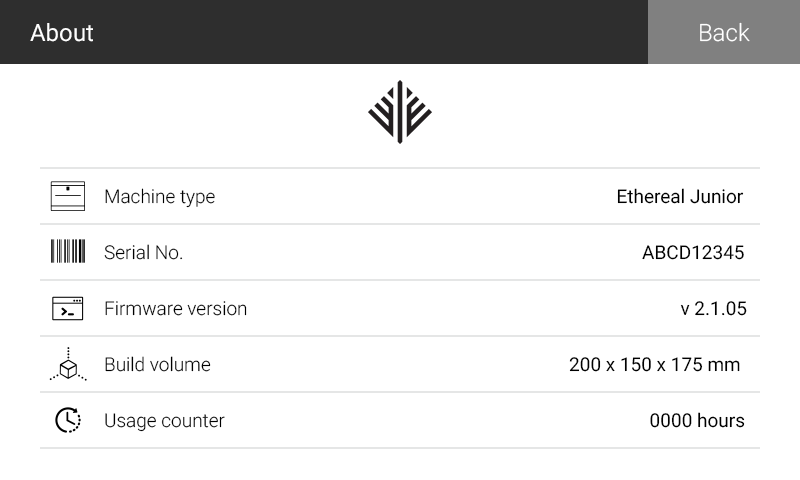
<style>
.page{position:relative;width:800px;height:480px;background:#ffffff}
.page>*{position:absolute;margin:0}
.t1{font:24px "Roboto-Black";color:#ffffff}
.t2{font:19px "Roboto-Light";color:#000000}
.t3{font:19px "Roboto-Black";color:#000000}
</style>
<div class="page">
<p class="t1" style="left:30px;top:23px;width:63px;height:19px">About</p>
<p class="t2" style="left:105px;top:188px;width:110px;height:20px">Machine type</p>
<p class="t3" style="left:617px;top:188px;width:127px;height:16px">Ethereal Junior</p>
<p class="t2" style="left:104px;top:244px;width:79px;height:16px">Serial No.</p>
<p class="t3" style="left:642px;top:245px;width:102px;height:15px">ABCD12345</p>
<p class="t2" style="left:105px;top:301px;width:142px;height:15px">Firmware version</p>
<p class="t3" style="left:680px;top:301px;width:67px;height:15px">v 2.1.05</p>
<p class="t2" style="left:105px;top:356px;width:106px;height:16px">Build volume</p>
<p class="t3" style="left:569px;top:357px;width:171px;height:15px">200 x 150 x 175 mm</p>
<p class="t2" style="left:105px;top:413px;width:120px;height:19px">Usage counter</p>
<p class="t3" style="left:650px;top:412px;width:95px;height:16px">0000 hours</p>
</div>
